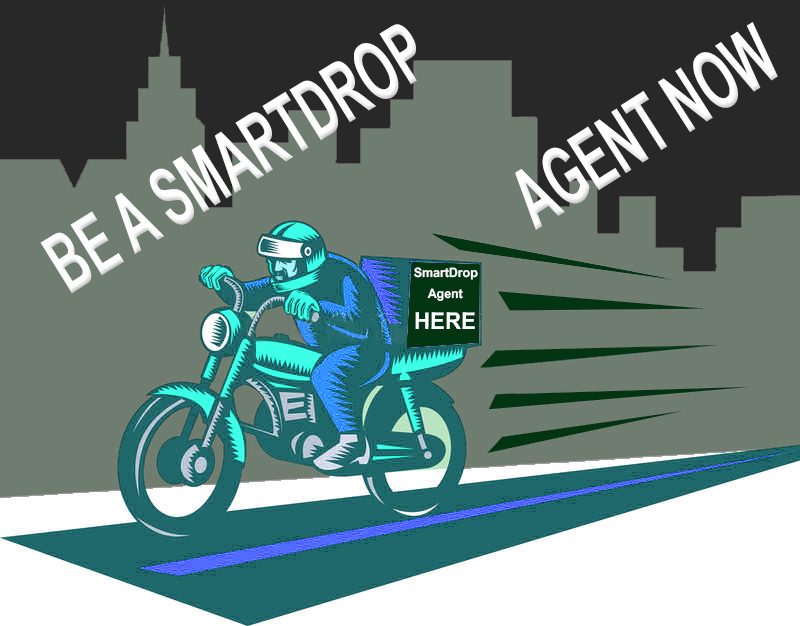
<style>
.page{position:relative;width:800px;height:626px;background:#6e7d6f}
.page>*{position:absolute;margin:0}
.t1{font:83px "Arial-BoldMT";color:#ffffff;scale:0.57 1}
.t2{font:13px "Arial-BoldMT";color:#ffffff;scale:0.96 1}
.t3{font:23.3px "Arial-BoldMT";color:#ffffff;scale:0.96 1}
</style>
<div class="page">
<p class="t1" style="left:40px;top:24px;width:377px;height:270px;rotate:-32deg">BE A SMARTDROP</p>
<p class="t1" style="left:515px;top:22px;width:263px;height:208px;rotate:-32deg">AGENT NOW</p>
<p class="t2" style="left:414px;top:267px;width:64px;height:13px">SmartDrop</p>
<p class="t2" style="left:427px;top:288px;width:36px;height:13px">Agent</p>
<p class="t3" style="left:415px;top:312px;width:60px;height:17px">HERE</p>
</div>
